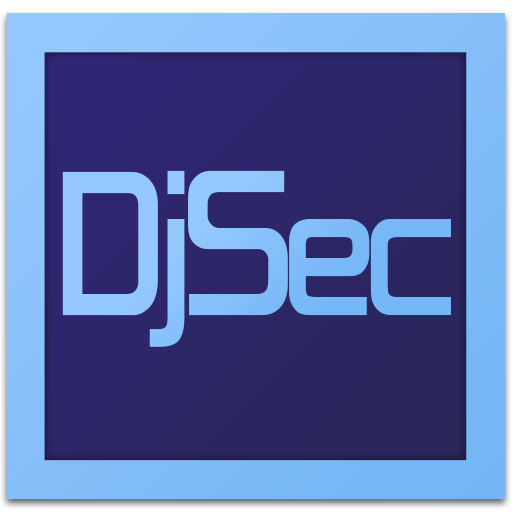
<style>
.page{position:relative;width:512px;height:512px}
.page>*{position:absolute;margin:0}
.t1{font:192px "TRENDS";letter-spacing:-0.04em;color:#8bc4fc;scale:0.83 1}
</style>
<div class="page">
<p class="t1" style="left:62px;top:170px;width:389px;height:177px">DjSec</p>
</div>
